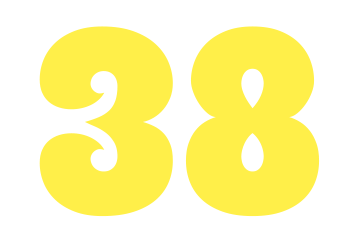
<style>
.page{position:relative;width:354px;height:236px;background:#ffffff}
.page>*{position:absolute;margin:0}
.t1{font:250px "SpicyRice-Regular";color:#ffef49}
</style>
<div class="page">
<p class="t1" style="left:39px;top:26px;width:281px;height:191px">38</p>
</div>
